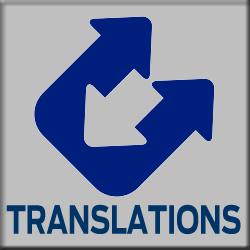
<style>
.page{position:relative;width:250px;height:250px;background:#bfbfbf}
.page>*{position:absolute;margin:0}
.t1{font:38px "Antenna-Bold";color:#003366;scale:0.71 1}
</style>
<div class="page">
<p class="t1" style="left:6px;top:204px;width:235px;height:31px">TRANSLATIONS</p>
</div>
